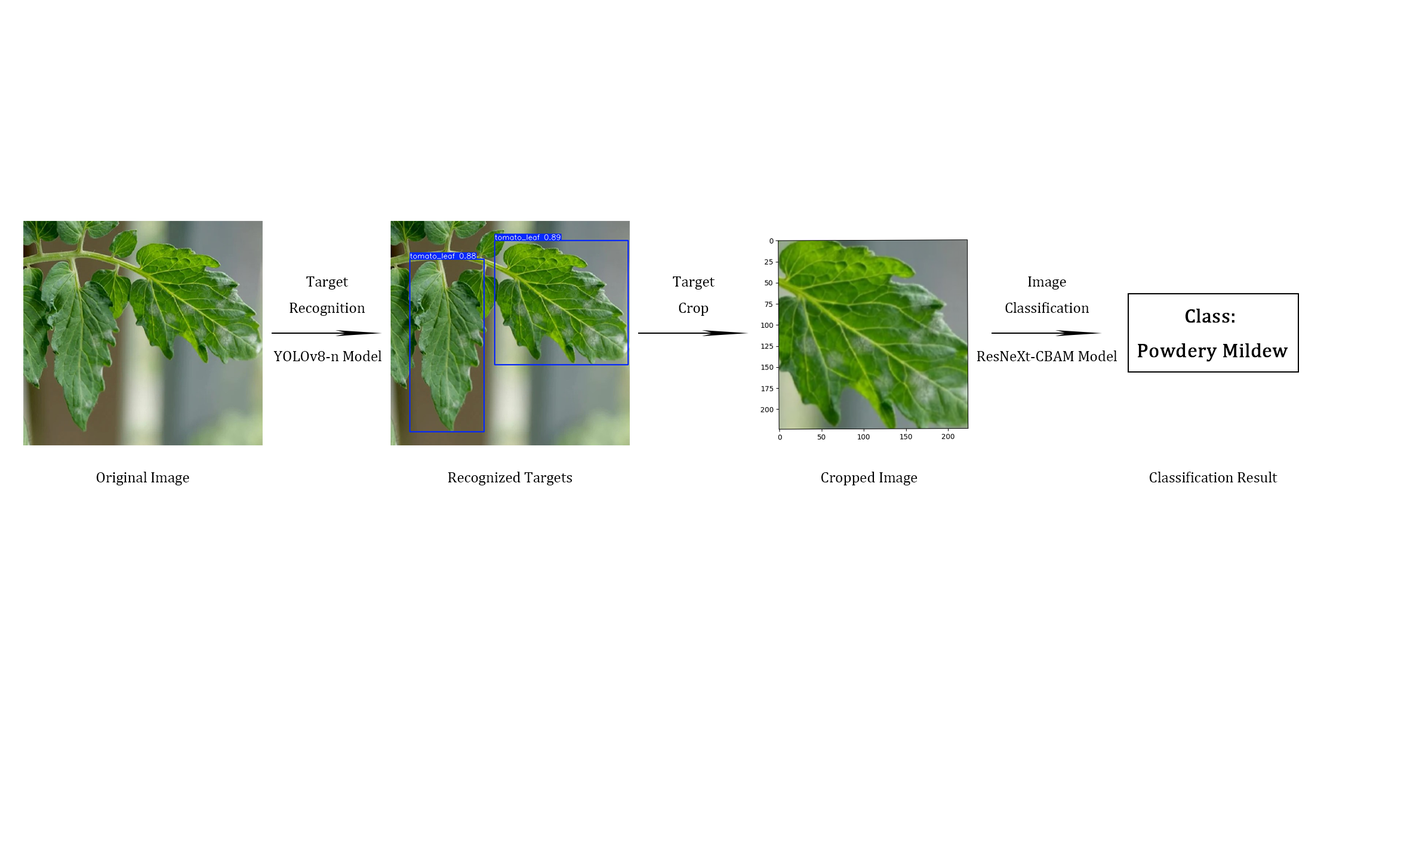
<style>
.page{position:relative;width:1410px;height:846px;background:#ffffff}
.page>*{position:absolute;margin:0}
.t1{font:14.9px "CambriaMath";color:#000000}
.t2{font:19.9px "CambriaMath";color:#000000;font-weight:bold}
</style>
<div class="page">
<p class="t1" style="left:289px;top:276px;width:76px;height:40px;text-align:center">Target<br>Recognition</p>
<p class="t1" style="left:673px;top:276px;width:41px;height:40px;text-align:center">Target<br>Crop</p>
<p class="t1" style="left:1005px;top:276px;width:84px;height:37px;text-align:center">Image<br>Classification</p>
<p class="t2" style="left:1138px;top:309px;width:150px;height:53px;text-align:center">Class: <br>Powdery Mildew</p>
<p class="t1" style="left:273px;top:350px;width:108px;height:11px">YOLOv8-n Model</p>
<p class="t1" style="left:977px;top:350px;width:140px;height:11px">ResNeXt-CBAM Model</p>
<p class="t1" style="left:96px;top:472px;width:93px;height:13px">Original Image</p>
<p class="t1" style="left:448px;top:472px;width:124px;height:13px">Recognized Targets</p>
<p class="t1" style="left:821px;top:472px;width:96px;height:13px">Cropped Image</p>
<p class="t1" style="left:1149px;top:472px;width:128px;height:10px">Classification Result</p>
</div>
